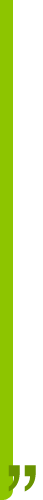
<style>
.page{position:relative;width:43px;height:500px;background:#ffffff}
.page>*{position:absolute;margin:0}
.t1{font:84.4px "GenevaCY";color:#699300}
</style>
<div class="page">
<p class="t1" style="left:8px;top:465px;width:28px;height:27px;rotate:180deg">“</p>
</div>
